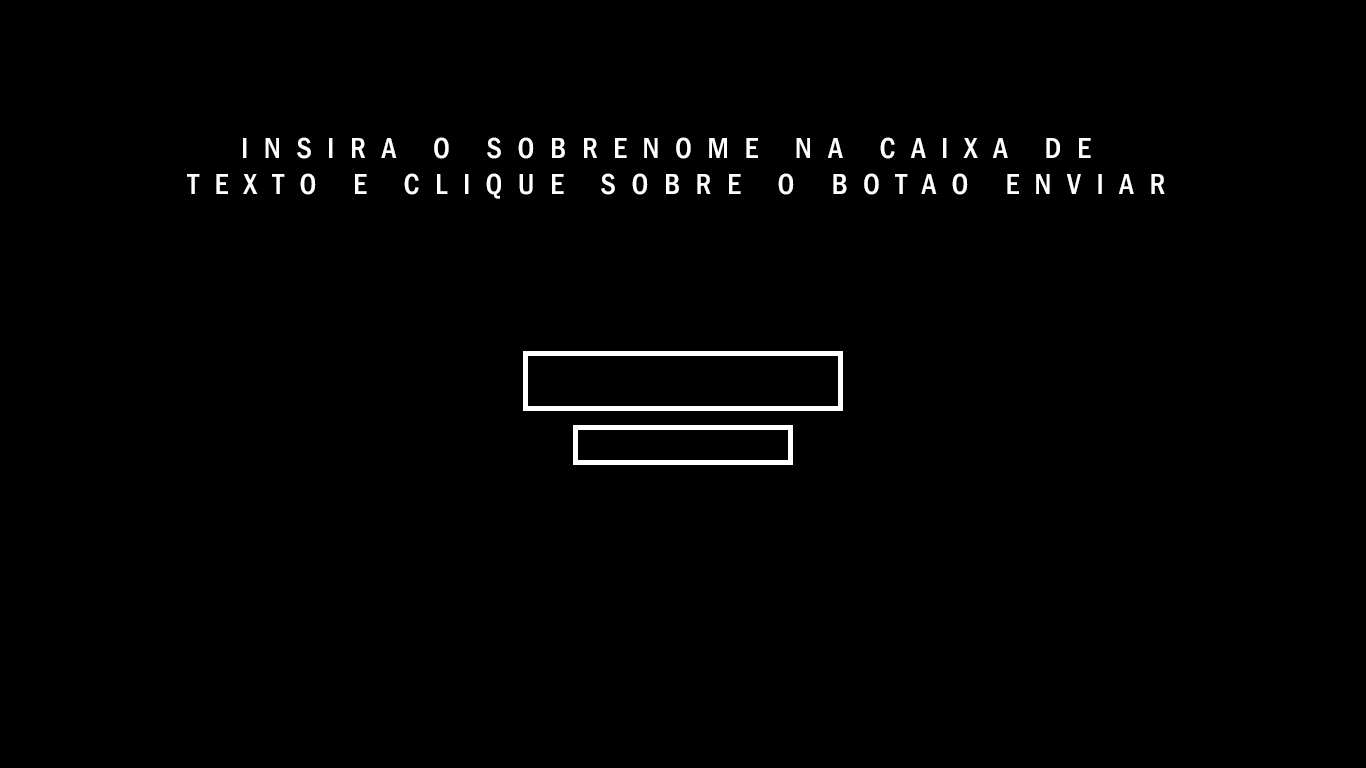
<style>
.page{position:relative;width:1366px;height:768px;background:#000000}
.page>*{position:absolute;margin:0}
.t1{font:29.9px "FranklinGothic-MediumCond";letter-spacing:0.52em;color:#ffffff;text-transform:uppercase}
.t2{font:29.9px "FranklinGothic-MediumCond";letter-spacing:0.52em;color:#ffffff}
</style>
<div class="page">
<p class="t1" style="left:187px;top:137px;width:978px;height:62px;text-align:center"><span class="t2">I</span>nsira o sobrenome na caixa de <br>texto e clique sobre o botao enviar</p>
</div>
